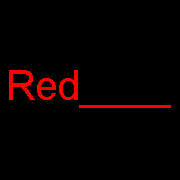
<style>
.page{position:relative;width:180px;height:180px;background:#000000}
.page>*{position:absolute;margin:0}
.t1{font:40.7px "ArialMT";color:#ff0000}
</style>
<div class="page">
<p class="t1" style="left:9px;top:70px;width:162px;height:38px">Red____</p>
</div>
